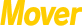
<style>
.page{position:relative;width:82px;height:26px;background:#ffffff}
.page>*{position:absolute;margin:0}
.t1{font:32px "RodinPro-EB";letter-spacing:-0.054em;color:#fecd00;font-style:italic;scale:0.85 1}
</style>
<div class="page">
<p class="t1" style="left:0px;top:0px;width:82px;height:26px">Mover</p>
</div>
